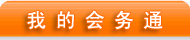
<style>
.page{position:relative;width:190px;height:40px}
.page>*{position:absolute;margin:0}
.t1{font:20px "SimHei";letter-spacing:0.46em;color:#ffffff}
</style>
<div class="page">
<p class="t1" style="left:27px;top:10px;width:136px;height:20px">我的会务通</p>
</div>
